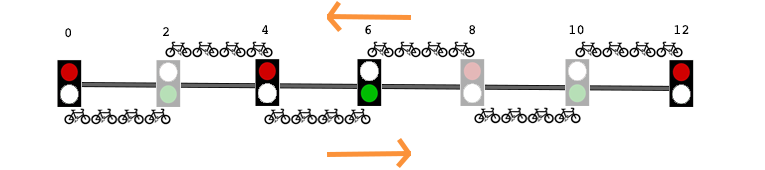
<style>
.page{position:relative;width:765px;height:170px;background:#ffffff}
.page>*{position:absolute;margin:0}
.t1{font:14px "Courier";color:#000000}
</style>
<div class="page">
<p class="t1" style="left:65px;top:28px;width:6px;height:10px">0</p>
<p class="t1" style="left:163px;top:27px;width:6px;height:9px">2</p>
<p class="t1" style="left:262px;top:25px;width:6px;height:9px">4</p>
<p class="t1" style="left:365px;top:25px;width:6px;height:10px">6</p>
<p class="t1" style="left:469px;top:25px;width:6px;height:10px">8</p>
<p class="t1" style="left:569px;top:25px;width:15px;height:10px">10</p>
<p class="t1" style="left:674px;top:25px;width:15px;height:9px">12</p>
</div>
